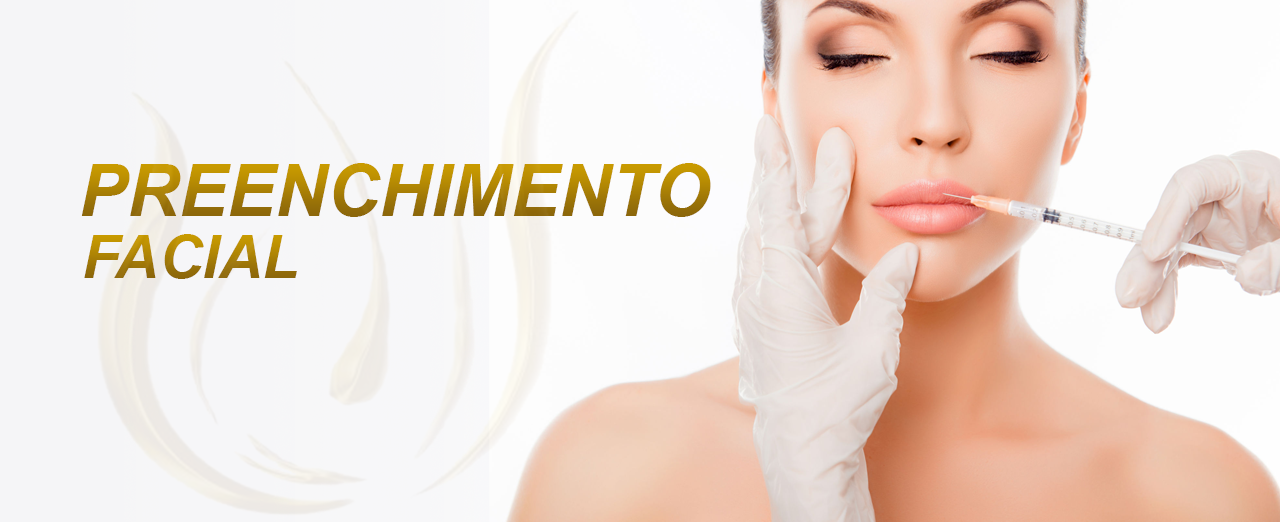
<style>
.page{position:relative;width:1280px;height:522px}
.page>*{position:absolute;margin:0}
.t1{font:72px "Arial-BoldItalicMT"}
.t2{font:60px "Arial-BoldItalicMT"}
</style>
<div class="page">
<p class="t1" style="left:81px;top:163px;width:630px;height:54px">PREENCHIMENTO</p>
<p class="t2" style="left:84px;top:234px;width:213px;height:45px">FACIAL</p>
</div>
